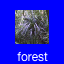
<style>
.page{position:relative;width:64px;height:64px;background:#0000ff}
.page>*{position:absolute;margin:0}
.t1{font:12px "HelveticaNeue";color:#ffffff}
</style>
<div class="page">
<p class="t1" style="left:17px;top:51px;width:31px;height:11px">forest</p>
</div>
